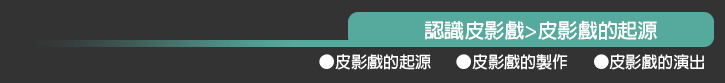
<style>
.page{position:relative;width:725px;height:83px;background:#333333}
.page>*{position:absolute;margin:0}
.t1{font:20px "AdobeFanHeitiStd-Bold";color:#ffffff}
.t2{font:16px "AdobeFanHeitiStd-Bold";color:#ffffff}
</style>
<div class="page">
<p class="t1" style="left:424px;top:20px;width:233px;height:20px">認識皮影戲&gt;皮影戲的起源</p>
<p class="t2" style="left:319px;top:54px;width:385px;height:16px">●皮影戲的起源       ●皮影戲的製作       ●皮影戲的演出</p>
</div>
